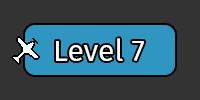
<style>
.page{position:relative;width:200px;height:100px;background:#333333}
.page>*{position:absolute;margin:0}
.t1{font:30px "FiraSans-Regular";color:#ffffff}
</style>
<div class="page">
<p class="t1" style="left:56px;top:38px;width:88px;height:23px">Level 7</p>
</div>
